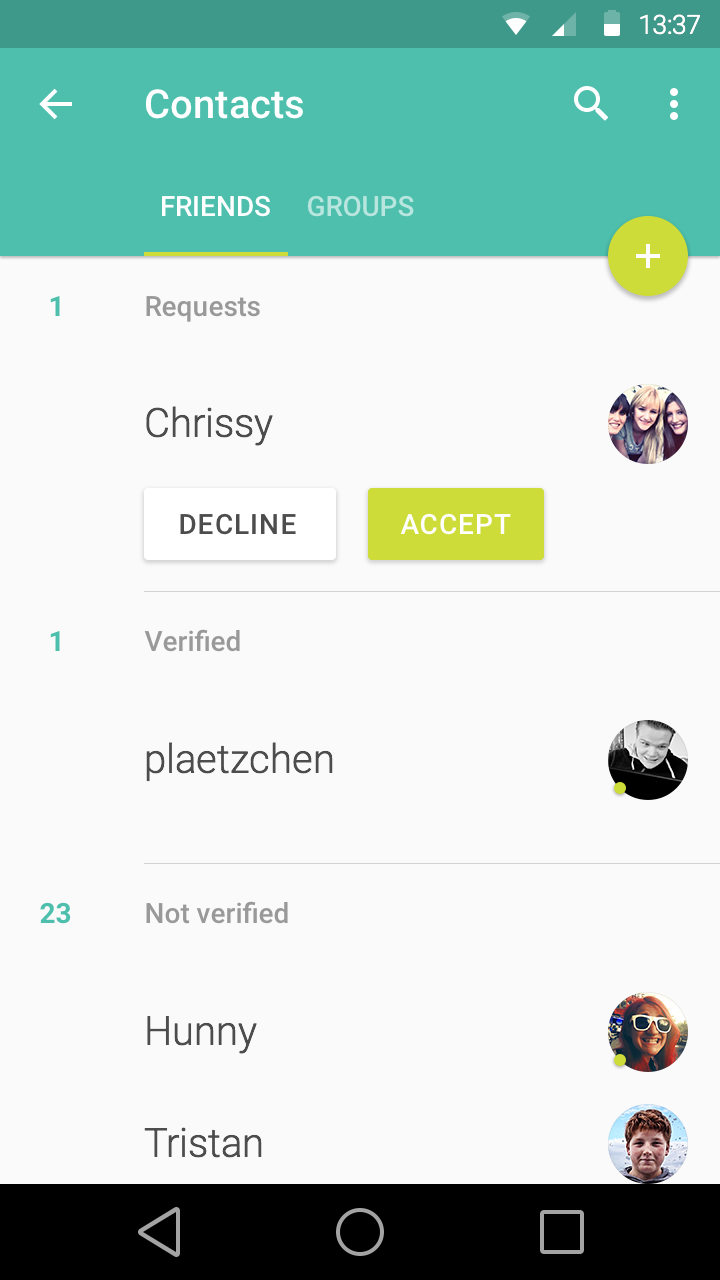
<style>
.page{position:relative;width:720px;height:1280px;background:#fafafa}
.page>*{position:absolute;margin:0}
.t1{font:26.1px "Roboto-Light";color:#ffffff}
.t2{font:40px "Roboto-Medium";color:#ffffff}
.t3{font:28px "Roboto-Medium";color:#ffffff;text-transform:uppercase}
.t4{font:28px "Roboto-Medium";color:#b8e5de;text-transform:uppercase}
.t5{font:28px "Roboto-Bold";color:#4dbfac}
.t6{font:28px "Roboto-Medium";color:#999999}
.t7{font:40px "Roboto-Light";color:#4d4d4d}
.t8{font:28px "Roboto-Medium";letter-spacing:0.04em;color:#4d4d4d;text-transform:uppercase}
.t9{font:28px "Roboto-Medium";letter-spacing:0.04em;color:#ffffff;text-transform:uppercase}
</style>
<div class="page">
<p class="t1" style="left:640px;top:14px;width:60px;height:21px">13:37</p>
<p class="t2" style="left:146px;top:89px;width:157px;height:30px">Contacts</p>
<p class="t3" style="left:162px;top:195px;width:108px;height:22px">Friends</p>
<p class="t4" style="left:307px;top:195px;width:107px;height:22px">Groups</p>
<p class="t5" style="left:50px;top:296px;width:10px;height:20px">1</p>
<p class="t6" style="left:146px;top:296px;width:114px;height:26px">Requests</p>
<p class="t7" style="left:146px;top:406px;width:127px;height:40px">Chrissy</p>
<p class="t8" style="left:180px;top:513px;width:116px;height:22px">Decline</p>
<p class="t9" style="left:400px;top:513px;width:111px;height:22px">Accept</p>
<p class="t6" style="left:144px;top:629px;width:96px;height:23px">Verified</p>
<p class="t5" style="left:50px;top:631px;width:10px;height:20px">1</p>
<p class="t7" style="left:146px;top:742px;width:187px;height:40px">plaetzchen</p>
<p class="t5" style="left:40px;top:902px;width:31px;height:22px">23</p>
<p class="t6" style="left:146px;top:901px;width:142px;height:23px">Not verified</p>
<p class="t7" style="left:147px;top:1016px;width:110px;height:38px">Hunny</p>
<p class="t7" style="left:144px;top:1127px;width:118px;height:31px">Tristan</p>
</div>
